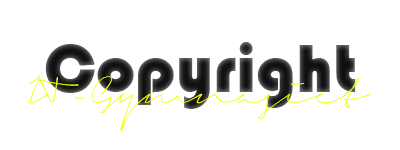
<style>
.page{position:relative;width:400px;height:150px;background:#ffffff}
.page>*{position:absolute;margin:0}
.t1{font:70px "Bauhaus93"}
.t2{font:35px "SignericaThin";color:#f0ff00}
</style>
<div class="page">
<p class="t1" style="left:45px;top:42px;width:311px;height:67px">Copyright</p>
<p class="t2" style="left:30px;top:75px;width:341px;height:57px">IT-Gymnasiet</p>
</div>
